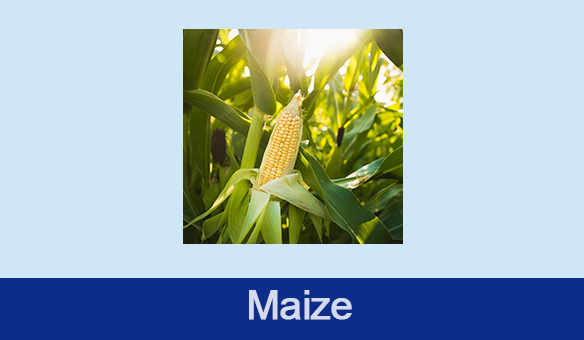
<style>
.page{position:relative;width:584px;height:340px;background:#cee6f6}
.page>*{position:absolute;margin:0}
.t1{font:40.2px "ArialMT";letter-spacing:-0.03em;color:#d4dbed;font-weight:bold}
</style>
<div class="page">
<p class="t1" style="left:249px;top:290px;width:103px;height:30px">Maize</p>
</div>
